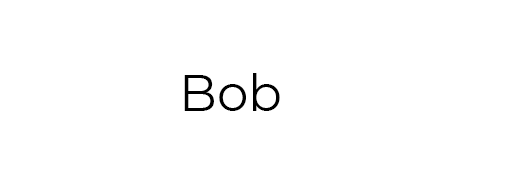
<style>
.page{position:relative;width:525px;height:180px;background:#ffffff}
.page>*{position:absolute;margin:0}
.t1{font:50px "Montserrat-Regular";color:#000000}
</style>
<div class="page">
<p class="t1" style="left:184px;top:73px;width:96px;height:38px">Bob</p>
</div>
